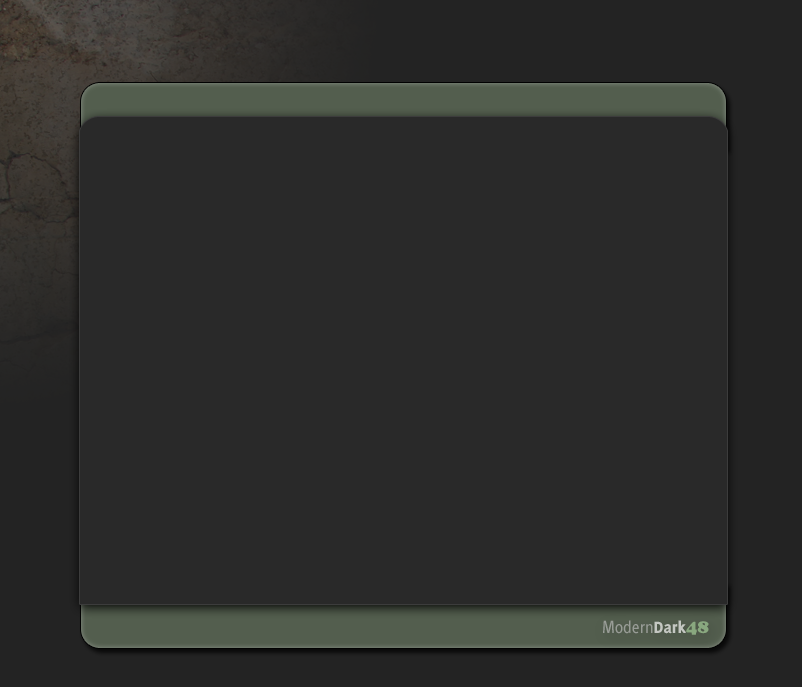
<style>
.page{position:relative;width:802px;height:687px;background:#292929}
.page>*{position:absolute;margin:0}
.t1{font:18px "MyriadWebPro-Condensed"}
.t2{font:18px "Delicious-Heavy"}
.t3{font:18px "CooperBlackStd"}
</style>
<div class="page">
<p class="t1" style="left:603px;top:620px;width:106px;height:15px">Modern<span class="t2">Dark</span><span class="t3">48</span></p>
</div>
